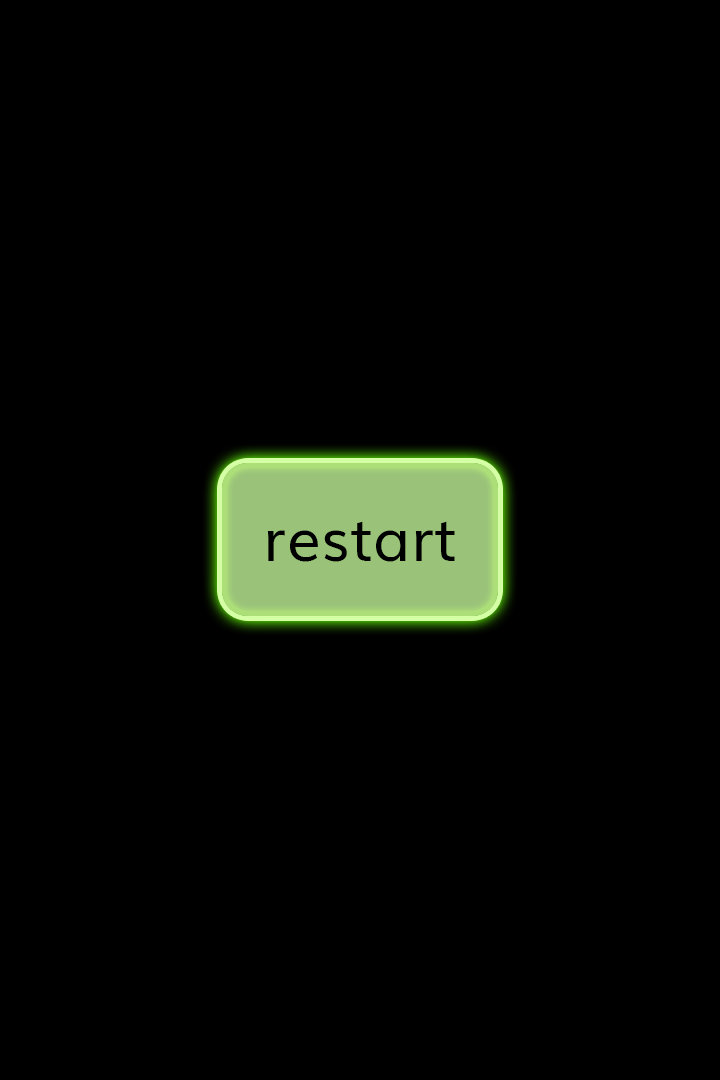
<style>
.page{position:relative;width:720px;height:1080px;background:#000000}
.page>*{position:absolute;margin:0}
.t1{font:60px "Muli";color:#000000}
</style>
<div class="page">
<p class="t1" style="left:267px;top:521px;width:188px;height:41px">restart</p>
</div>
